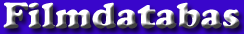
<style>
.page{position:relative;width:244px;height:34px;background:#3906cb}
.page>*{position:absolute;margin:0}
.t1{font:36px "CooperBlackStd"}
</style>
<div class="page">
<p class="t1" style="left:3px;top:2px;width:237px;height:27px">Filmdatabas</p>
</div>
